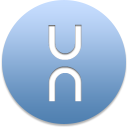
<style>
.page{position:relative;width:128px;height:128px;background:#ffffff}
.page>*{position:absolute;margin:0}
.t1{font:121.7px "AppleSymbols";color:#ffffff}
</style>
<div class="page">
<p class="t1" style="left:48px;top:24px;width:34px;height:78px">⩆</p>
</div>
